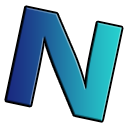
<style>
.page{position:relative;width:128px;height:128px;background:#ffffff}
.page>*{position:absolute;margin:0}
.t1{font:141px "MyriadPro-Bold";scale:1.24 1}
</style>
<div class="page">
<p class="t1" style="left:6px;top:7px;width:116px;height:114px;rotate:12deg">N</p>
</div>
